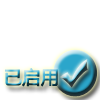
<style>
.page{position:relative;width:100px;height:100px;background:#ffffff}
.page>*{position:absolute;margin:0}
.t1{font:18px "MicrosoftYaHei";font-weight:bold}
</style>
<div class="page">
<p class="t1" style="left:5px;top:68px;width:53px;height:19px">已启用</p>
</div>
